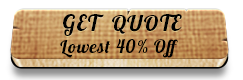
<style>
.page{position:relative;width:243px;height:80px}
.page>*{position:absolute;margin:0}
.t1{font:22px "Lobster1.4";letter-spacing:0.05em;color:#000000;text-transform:uppercase}
.t2{font:24px "Lobster1.4";letter-spacing:0.05em;color:#000000;text-transform:uppercase}
.t3{font:18px "Lobster1.4";letter-spacing:0.05em;color:#000000}
</style>
<div class="page">
<p class="t1" style="left:63px;top:14px;width:119px;height:22px"><span class="t2">   </span>Get  Quote</p>
<p class="t3" style="left:60px;top:39px;width:118px;height:19px">Lowest 40% Off</p>
</div>
